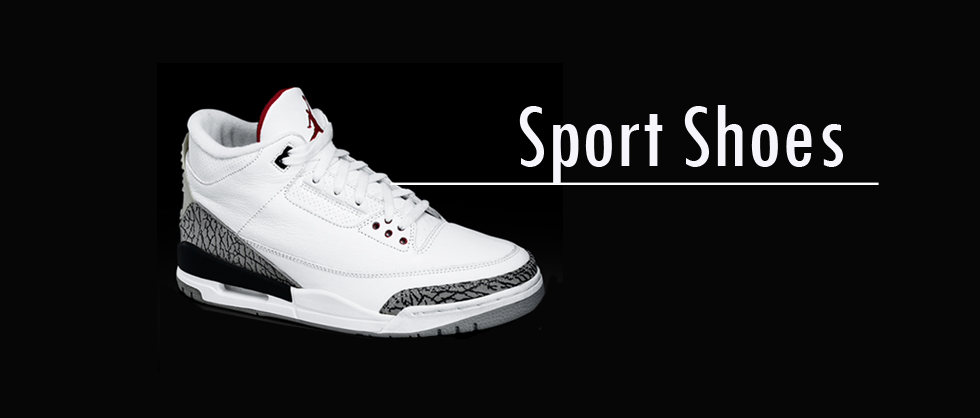
<style>
.page{position:relative;width:980px;height:418px;background:#060606}
.page>*{position:absolute;margin:0}
.t1{font:95.2px "TwCenMT-Condensed";color:#f6f5fb}
</style>
<div class="page">
<p class="t1" style="left:519px;top:105px;width:324px;height:79px">Sport Shoes</p>
</div>
